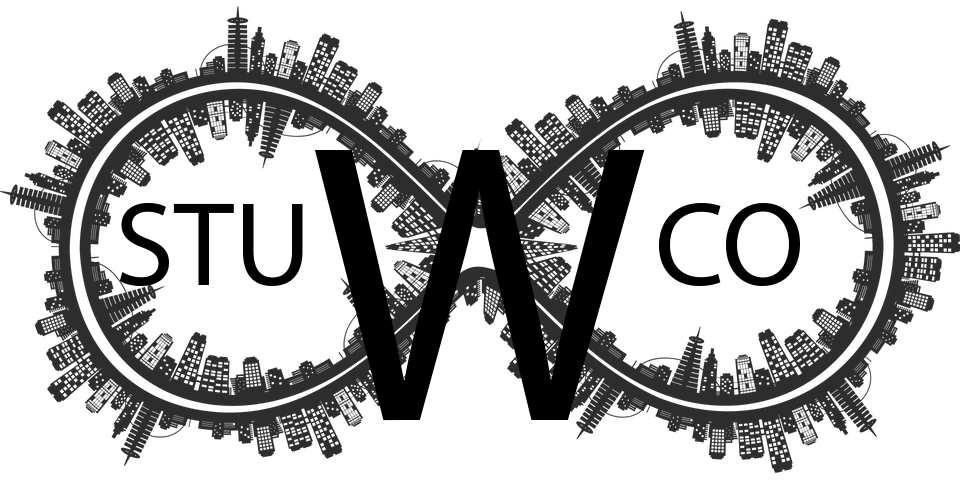
<style>
.page{position:relative;width:960px;height:480px;background:#ffffff}
.page>*{position:absolute;margin:0}
.t1{font:400px "MyriadPro-Regular";color:#000000}
.t2{font:120px "MyriadPro-Regular";color:#000000}
</style>
<div class="page">
<p class="t1" style="left:315px;top:149px;width:330px;height:272px">W</p>
<p class="t2" style="left:119px;top:202px;width:681px;height:85px">STU          CO</p>
</div>
